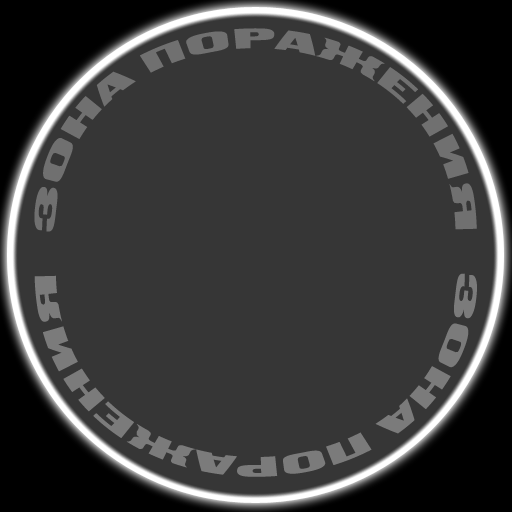
<style>
.page{position:relative;width:512px;height:512px;background:#363636}
.page>*{position:absolute;margin:0}
.t1{font:27.4px/47.7px "BlackGroteskC";color:#707070;scale:1.45 1}
.t2{font:27.4px "BlackGroteskC";color:#7b7b7b;scale:1.45 1}
</style>
<div class="page">
<p class="t1" style="left:34px;top:28px;width:443px;height:204px;text-align:center">ЗОНА ПОРАЖЕНИЯ</p>
<p class="t2" style="left:34px;top:273px;width:443px;height:204px;rotate:180deg">ЗОНА ПОРАЖЕНИЯ</p>
</div>
